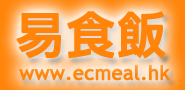
<style>
.page{position:relative;width:185px;height:90px;background:#ff8409}
.page>*{position:absolute;margin:0}
.t1{font:49.5px "LiGothicMed";color:#ff8409;font-weight:bold}
.t2{font:19.8px "TrebuchetMS";color:#ff8408;font-weight:bold}
</style>
<div class="page">
<p class="t1" style="left:16px;top:11px;width:150px;height:48px">易食飯</p>
<p class="t2" style="left:19px;top:64px;width:151px;height:17px">www.ecmeal.hk</p>
</div>
